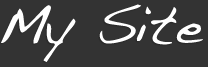
<style>
.page{position:relative;width:208px;height:67px;background:#333333}
.page>*{position:absolute;margin:0}
.t1{font:55px "Handwriting-Dakota";color:#ffffff}
</style>
<div class="page">
<p class="t1" style="left:1px;top:4px;width:202px;height:58px">My Site</p>
</div>
